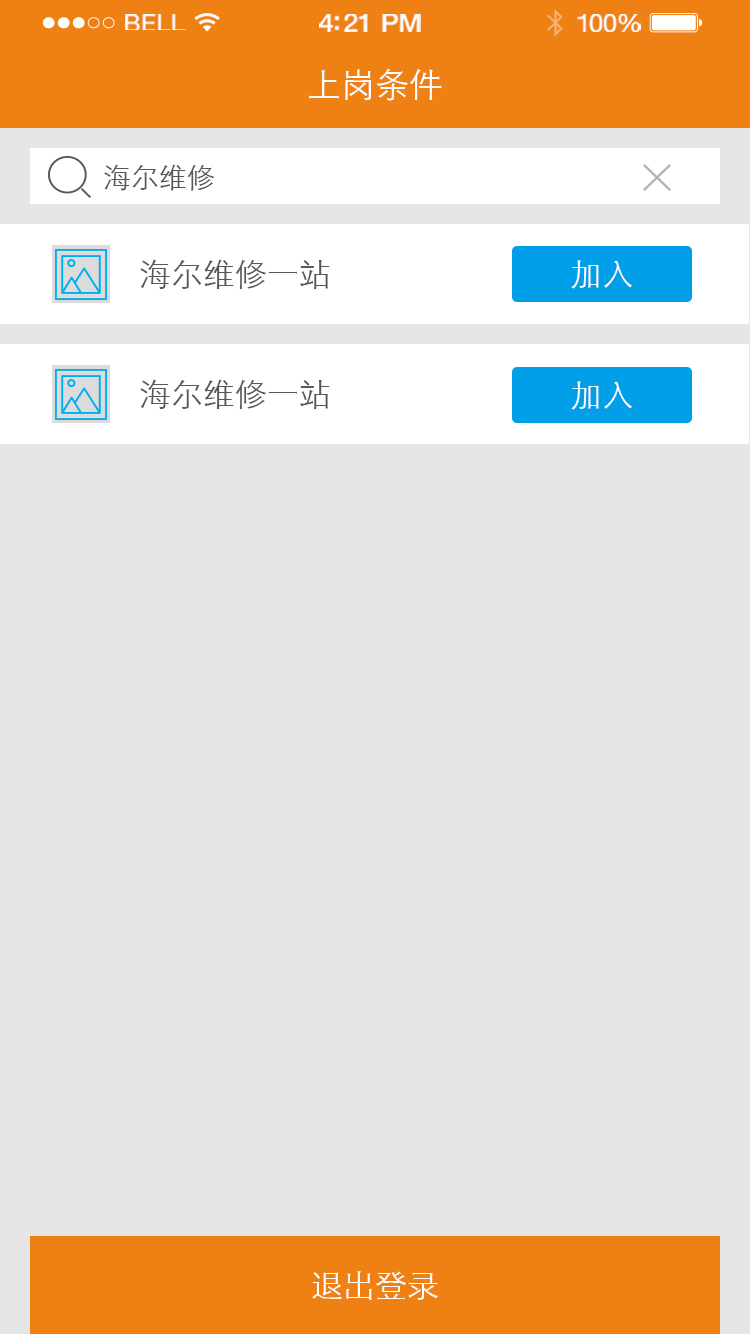
<style>
.page{position:relative;width:750px;height:1334px;background:#e6e6e6}
.page>*{position:absolute;margin:0}
.t1{font:23.3px "HelveticaNeue";letter-spacing:0.02em;color:#ffffff;scale:1.06 1}
.t2{font:25.3px "HelveticaNeue-Medium";letter-spacing:-0.02em;color:#ffffff;scale:1.06 1}
.t3{font:24.3px "HelveticaNeue";letter-spacing:-0.02em;color:#ffffff;scale:1.06 1}
.t4{font:34px "STXihei";color:#ffffff}
.t5{font:28px "STXihei";color:#595757}
.t6{font:32px "STXihei";color:#595757}
.t7{font:32px "STXihei";color:#ffffff}
</style>
<div class="page">
<p class="t1" style="left:125px;top:14px;width:61px;height:16px">BELL</p>
<p class="t2" style="left:319px;top:14px;width:102px;height:18px">4:21 PM</p>
<p class="t3" style="left:577px;top:14px;width:64px;height:18px">100%</p>
<p class="t4" style="left:309px;top:69px;width:133px;height:32px">上岗条件</p>
<p class="t5" style="left:104px;top:164px;width:111px;height:27px">海尔维修</p>
<p class="t6" style="left:140px;top:259px;width:190px;height:30px">海尔维修一站</p>
<p class="t7" style="left:571px;top:260px;width:61px;height:29px">加入</p>
<p class="t6" style="left:140px;top:379px;width:190px;height:30px">海尔维修一站</p>
<p class="t7" style="left:571px;top:381px;width:61px;height:29px">加入</p>
<p class="t7" style="left:312px;top:1271px;width:126px;height:29px">退出登录</p>
</div>
